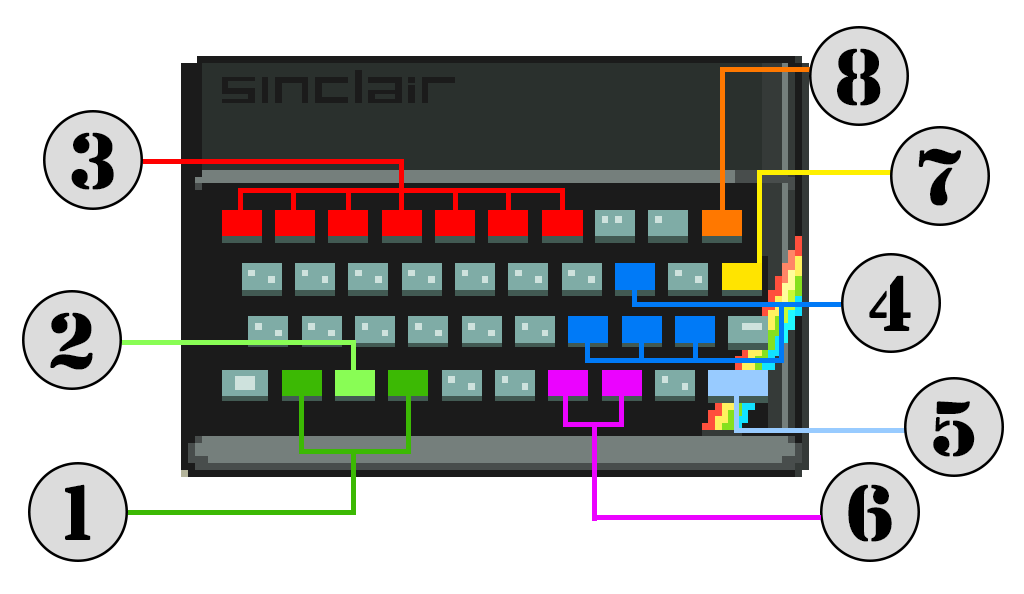
<style>
.page{position:relative;width:1024px;height:594px;background:#ffffff}
.page>*{position:absolute;margin:0}
.t1{font:78.9px "SanDiego";color:#000000}
</style>
<div class="page">
<p class="t1" style="left:837px;top:48px;width:44px;height:58px">8</p>
<p class="t1" style="left:71px;top:132px;width:43px;height:58px">3</p>
<p class="t1" style="left:918px;top:148px;width:43px;height:58px">7</p>
<p class="t1" style="left:869px;top:275px;width:42px;height:56px">4</p>
<p class="t1" style="left:50px;top:312px;width:43px;height:58px">2</p>
<p class="t1" style="left:933px;top:401px;width:42px;height:56px">5</p>
<p class="t1" style="left:65px;top:484px;width:26px;height:56px">1</p>
<p class="t1" style="left:848px;top:484px;width:44px;height:58px">6</p>
</div>
